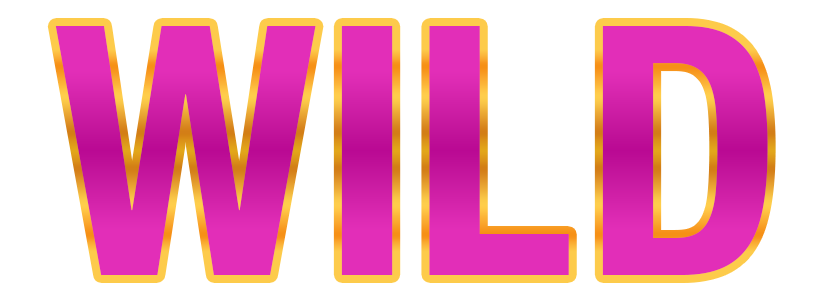
<style>
.page{position:relative;width:823px;height:301px;background:#ffffff}
.page>*{position:absolute;margin:0}
.t1{font:348.8px "HelveticaNeue-CondensedBold";color:#d726ae;text-transform:uppercase}
.t2{font:348.8px "HelveticaNeue-CondensedBold";color:#d928b0;text-transform:uppercase}
.t3{font:348.8px "HelveticaNeue-CondensedBold";color:#e22eb8;text-transform:uppercase}
.t4{font:348.8px "HelveticaNeue-CondensedBold";color:#dd2bb3;text-transform:uppercase}
</style>
<div class="page">
<p class="t1" style="left:55px;top:26px;width:261px;height:249px">W</p>
<p class="t2" style="left:341px;top:26px;width:52px;height:249px">I</p>
<p class="t3" style="left:429px;top:26px;width:140px;height:249px">L</p>
<p class="t4" style="left:602px;top:26px;width:166px;height:249px">D</p>
</div>
